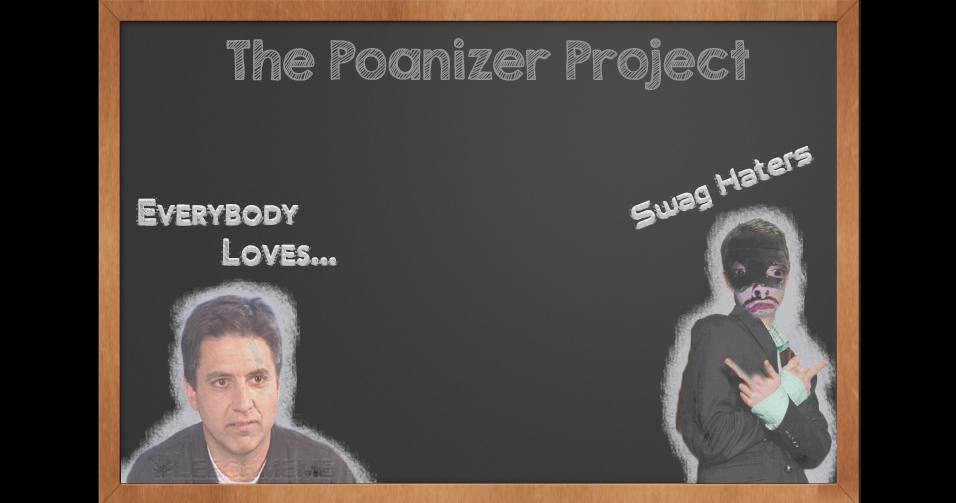
<style>
.page{position:relative;width:956px;height:503px;background:#000000}
.page>*{position:absolute;margin:0}
.t1{font:48px "KGSecondChancesSketch";color:#959595}
.t2{font:37.5px "FIFAWelcome";color:#bfc1c4}
.t3{font:33.6px "Figurativative";color:#bfc1c4}
</style>
<div class="page">
<p class="t1" style="left:226px;top:38px;width:524px;height:52px">The Poanizer Project</p>
<p class="t2" style="left:631px;top:146px;width:181px;height:82px;rotate:-21deg">Swag Haters</p>
<p class="t3" style="left:138px;top:198px;width:199px;height:67px">Everybody <br>    Loves...</p>
</div>
